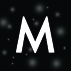
<style>
.page{position:relative;width:71px;height:71px;background:#070809}
.page>*{position:absolute;margin:0}
.t1{font:45px "Futura";letter-spacing:0.093em;color:#ffffff;font-weight:bold}
</style>
<div class="page">
<p class="t1" style="left:15px;top:16px;width:40px;height:37px">M</p>
</div>
